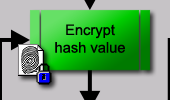
<style>
.page{position:relative;width:170px;height:100px;background:#c6c3c6}
.page>*{position:absolute;margin:0}
.t1{font:14.7px "ArialMT";color:#000000}
</style>
<div class="page">
<p class="t1" style="left:55px;top:24px;width:70px;height:29px;text-align:center">Encrypt<br>hash value</p>
</div>
